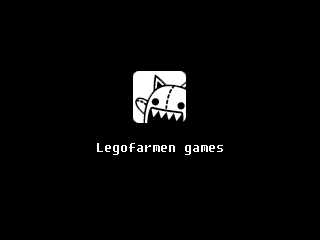
<style>
.page{position:relative;width:320px;height:240px;background:#000000}
.page>*{position:absolute;margin:0}
.t1{font:19px "Fixedsys";color:#ffffff}
</style>
<div class="page">
<p class="t1" style="left:97px;top:143px;width:126px;height:12px">Legofarmen games</p>
</div>
